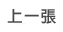
<style>
.page{position:relative;width:63px;height:32px;background:#ffffff}
.page>*{position:absolute;margin:0}
.t1{font:16px "LinGothic-Extra";letter-spacing:0.05em;color:#494949}
</style>
<div class="page">
<p class="t1" style="left:7px;top:9px;width:49px;height:15px">上一張</p>
</div>
